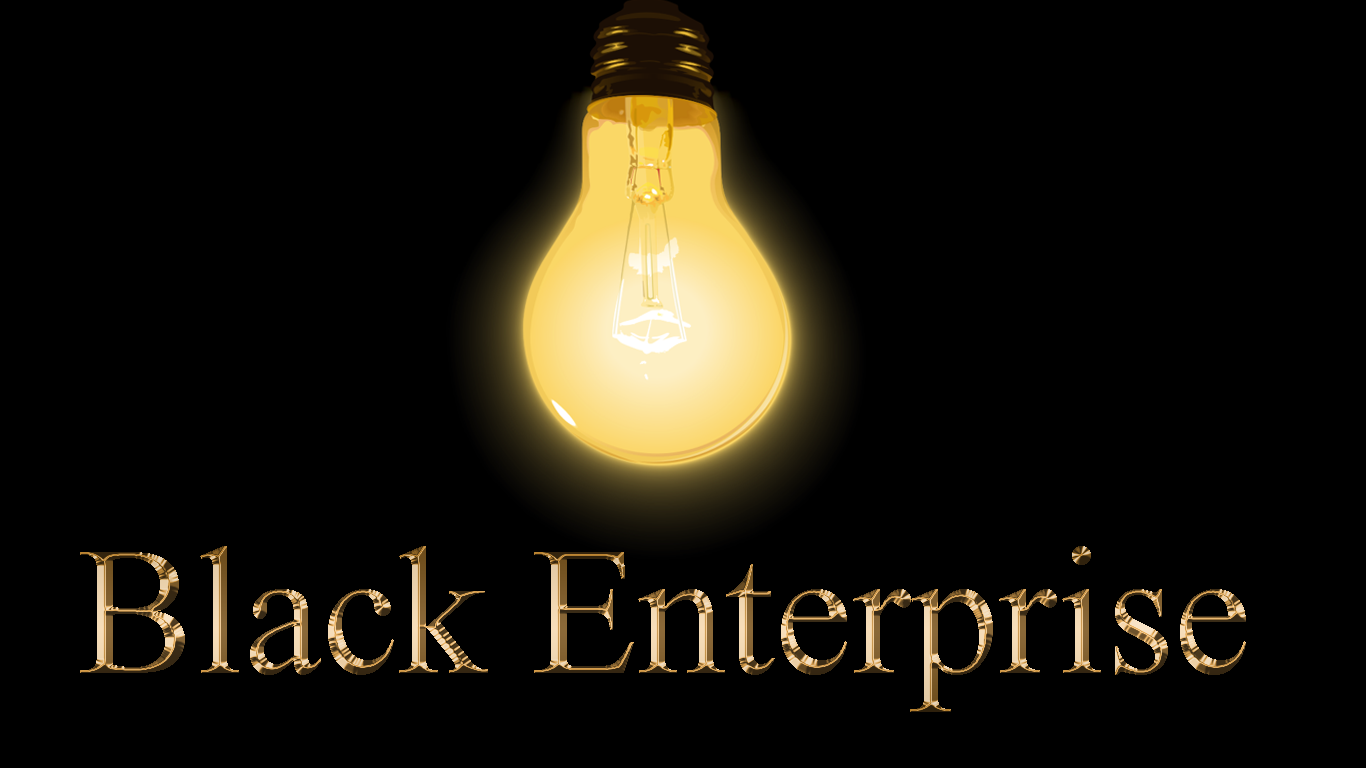
<style>
.page{position:relative;width:1366px;height:768px;background:#000000}
.page>*{position:absolute;margin:0}
.t1{font:182.8px "TimesNewRomanPSMT";scale:0.96 1}
</style>
<div class="page">
<p class="t1" style="left:80px;top:546px;width:1166px;height:166px">Black Enterprise</p>
</div>
